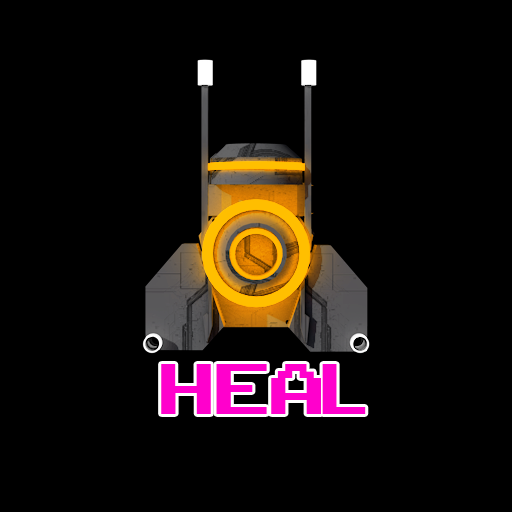
<style>
.page{position:relative;width:512px;height:512px;background:#000000}
.page>*{position:absolute;margin:0}
.t1{font:100px "ArcadeClassic";color:#ff00cc}
</style>
<div class="page">
<p class="t1" style="left:161px;top:364px;width:205px;height:50px">Heal</p>
</div>
